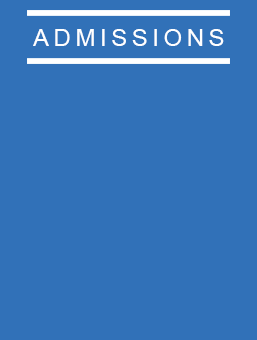
<style>
.page{position:relative;width:257px;height:340px;background:#3171b8}
.page>*{position:absolute;margin:0}
.t1{font:24.2px "ArialMT";letter-spacing:0.19em;color:#ffffff}
</style>
<div class="page">
<p class="t1" style="left:33px;top:29px;width:191px;height:17px">ADMISSIONS</p>
</div>
